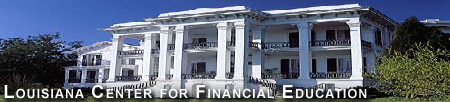
<style>
.page{position:relative;width:450px;height:102px}
.page>*{position:absolute;margin:0}
.t1{font:18px "Arial-BoldMT";letter-spacing:0.075em;color:#ffffff;font-variant:small-caps}
</style>
<div class="page">
<p class="t1" style="left:4px;top:84px;width:363px;height:15px">Louisiana Center for Financial Education</p>
</div>
